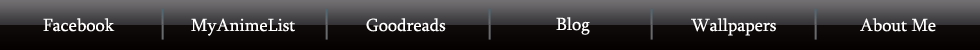
<style>
.page{position:relative;width:980px;height:50px}
.page>*{position:absolute;margin:0}
.t1{font:18px "Sylfaen";color:#ffffff}
</style>
<div class="page">
<p class="t1" style="left:556px;top:17px;width:34px;height:18px">Blog</p>
<p class="t1" style="left:43px;top:18px;width:72px;height:14px">Facebook</p>
<p class="t1" style="left:191px;top:18px;width:104px;height:18px">MyAnimeList</p>
<p class="t1" style="left:366px;top:18px;width:80px;height:14px">Goodreads</p>
<p class="t1" style="left:691px;top:18px;width:85px;height:18px">Wallpapers</p>
<p class="t1" style="left:860px;top:18px;width:76px;height:14px">About Me</p>
</div>
